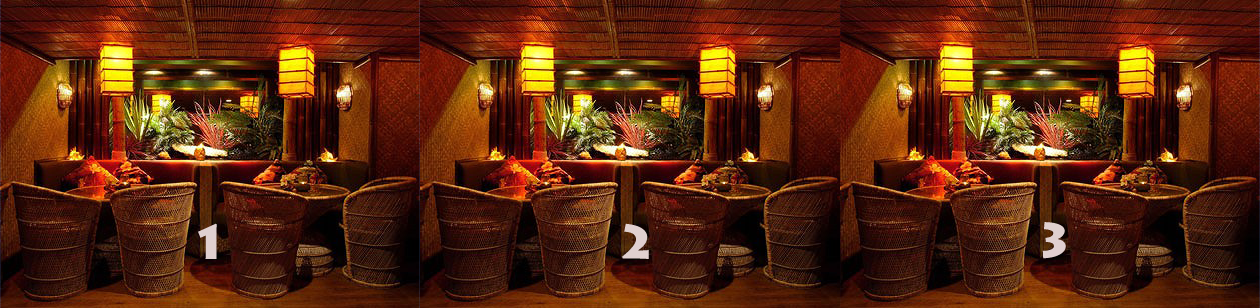
<style>
.page{position:relative;width:1260px;height:308px}
.page>*{position:absolute;margin:0}
.t1{font:48px "LithosPro-Black";color:#e0d0d0}
</style>
<div class="page">
<p class="t1" style="left:1042px;top:222px;width:24px;height:37px">3</p>
<p class="t1" style="left:198px;top:223px;width:19px;height:36px">1</p>
<p class="t1" style="left:622px;top:223px;width:27px;height:36px">2</p>
</div>
